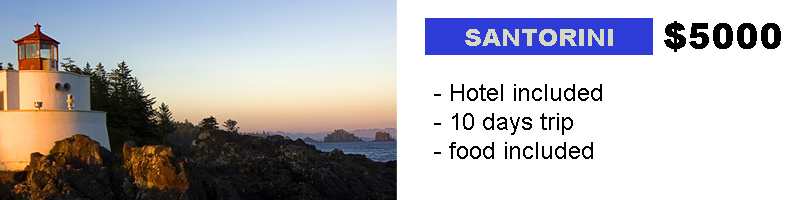
<style>
.page{position:relative;width:800px;height:200px;background:#ffffff}
.page>*{position:absolute;margin:0}
.t1{font:24px "Arial-Black";color:#d5d8c3}
.t2{font:36px "Arial-Black";color:#000000}
.t3{font:24px "ArialMT";color:#000000}
</style>
<div class="page">
<p class="t1" style="left:465px;top:29px;width:148px;height:17px">SANTORINI</p>
<p class="t2" style="left:664px;top:21px;width:117px;height:31px">$5000</p>
<p class="t3" style="left:434px;top:84px;width:168px;height:75px">- Hotel included<br> - 10 days trip<br> - food included</p>
</div>
